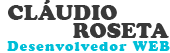
<style>
.page{position:relative;width:170px;height:53px;background:#ffffff}
.page>*{position:absolute;margin:0}
.t1{font:22px "CooperBlack";letter-spacing:0.005em;color:#393939}
.t2{font:14px "CooperBlack";letter-spacing:0.09em;color:#00bfd8}
</style>
<div class="page">
<p class="t1" style="left:8px;top:0px;width:109px;height:20px">CLÁUDIO</p>
<p class="t1" style="left:73px;top:23px;width:96px;height:15px">ROSETA</p>
<p class="t2" style="left:7px;top:41px;width:163px;height:10px">Desenvolvedor WEB</p>
</div>
